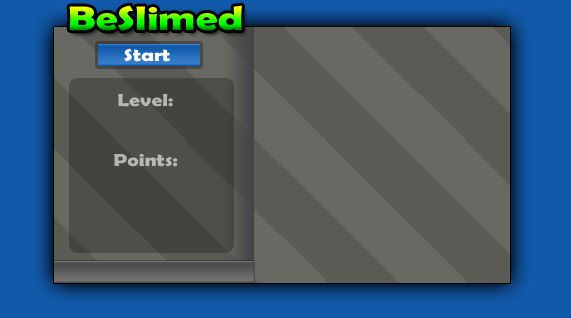
<style>
.page{position:relative;width:571px;height:318px;background:#5b5b56}
.page>*{position:absolute;margin:0}
.t1{font:34.5px "BerlinSansFBDemi-Bold";scale:1.25 1}
.t2{font:17.6px "BerlinSansFBDemi-Bold";color:#ffffff;scale:1.22 1}
.t3{font:17.6px "BerlinSansFBDemi-Bold";color:#b8b8b7;scale:1.22 1}
</style>
<div class="page">
<p class="t1" style="left:69px;top:5px;width:173px;height:26px">BeSlimed</p>
<p class="t2" style="left:124px;top:48px;width:46px;height:14px">Start</p>
<p class="t3" style="left:118px;top:94px;width:55px;height:13px">Level:</p>
<p class="t3" style="left:114px;top:154px;width:64px;height:13px">Points:</p>
</div>
